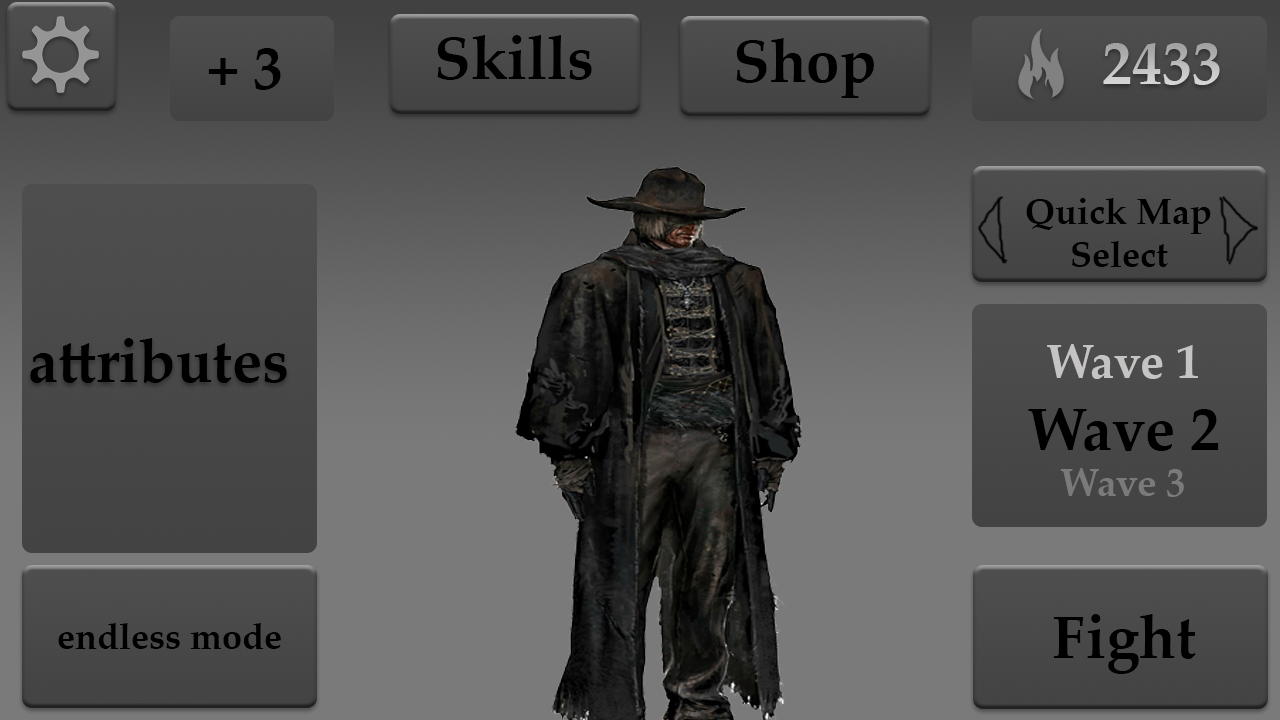
<style>
.page{position:relative;width:1280px;height:720px}
.page>*{position:absolute;margin:0}
.t1{font:60px "PalatinoLinotype-Bold";color:#000000}
.t2{font:60px "PalatinoLinotype-Bold"}
.t3{font:36px "PalatinoLinotype-Bold";color:#000000}
</style>
<div class="page">
<p class="t1" style="left:437px;top:35px;width:155px;height:45px">Skills</p>
<p class="t1" style="left:736px;top:38px;width:138px;height:60px">Shop</p>
<p class="t1" style="left:208px;top:48px;width:73px;height:42px">+ 3</p>
<p class="t2" style="left:1103px;top:43px;width:117px;height:42px">2433</p>
<p class="t3" style="left:1026px;top:198px;width:185px;height:69px;text-align:center">Quick Map<br>Select</p>
<p class="t1" style="left:30px;top:338px;width:257px;height:45px">attributes</p>
<p class="t1" style="left:1053px;top:614px;width:143px;height:60px">Fight</p>
<p class="t3" style="left:58px;top:623px;width:223px;height:26px">endless mode</p>
</div>
